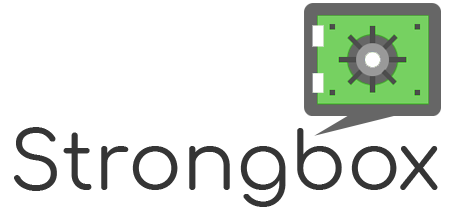
<style>
.page{position:relative;width:455px;height:210px;background:#ffffff}
.page>*{position:absolute;margin:0}
.t1{font:80px "Comfortaa-Regular";color:#353535}
</style>
<div class="page">
<p class="t1" style="left:14px;top:127px;width:424px;height:80px">Strongbox</p>
</div>
